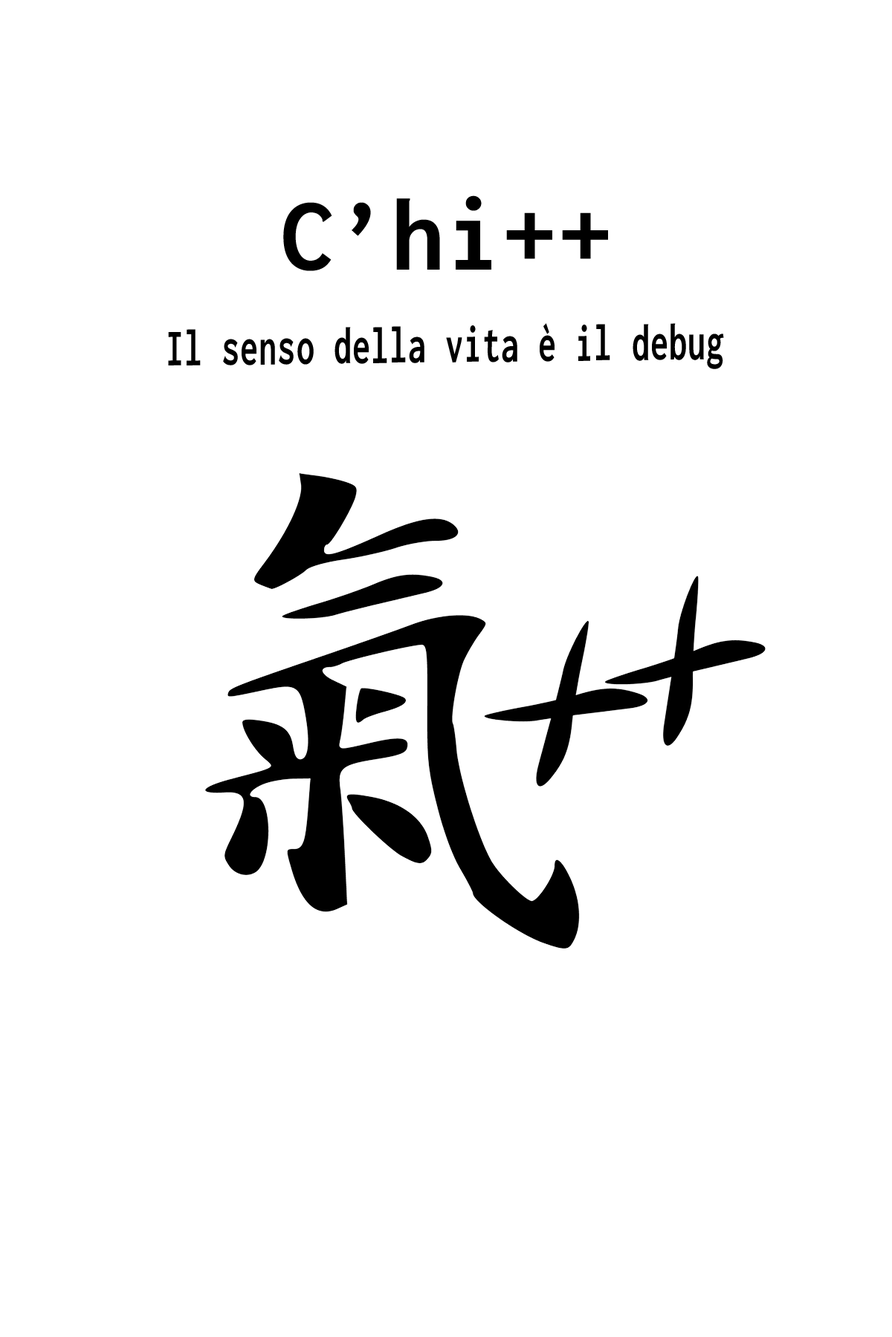
<style>
.page{position:relative;width:892px;height:1337px;background:#ffffff}
.page>*{position:absolute;margin:0}
.t1{font:107px "Inconsolata-Bold";letter-spacing:0.02em;color:#000000}
.t2{font:53.5px "Inconsolata-Bold";letter-spacing:0.02em;color:#000000;scale:0.67 1}
</style>
<div class="page">
<p class="t1" style="left:283px;top:195px;width:325px;height:76px">C’hi++</p>
<p class="t2" style="left:168px;top:323px;width:556px;height:46px;rotate:-1deg">Il senso della vita è il debug</p>
</div>
